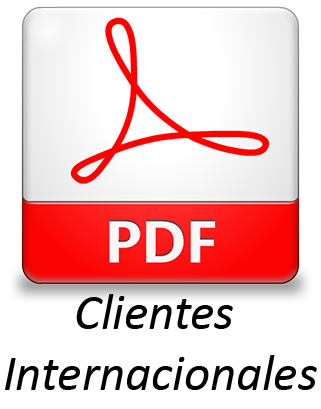
<style>
.page{position:relative;width:321px;height:409px;background:#ffffff}
.page>*{position:absolute;margin:0}
.t1{font:50.7px "Calibri-Italic";color:#000000}
</style>
<div class="page">
<p class="t1" style="left:5px;top:294px;width:312px;height:96px;text-align:center">Clientes <br>Internacionales</p>
</div>
